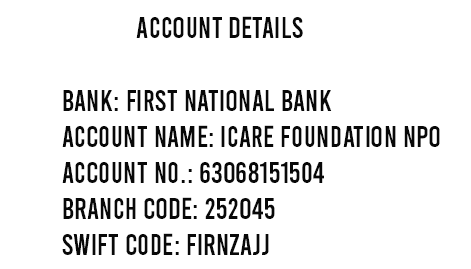
<style>
.page{position:relative;width:471px;height:269px;background:#ffffff}
.page>*{position:absolute;margin:0}
.t1{font:30.2px "Bebas-Regular";color:#080808;scale:0.95 1}
</style>
<div class="page">
<p class="t1" style="left:62px;top:16px;width:378px;height:239px">Account details <br><br>Bank: First National Bank<br>Account Name: iCARE FOUNDATION NPO<br>Account No.: 63068151504<br>Branch Code: 252045<br>Swift code: FIRNZAJJ</p>
</div>
